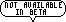
<style>
.page{position:relative;width:66px;height:22px;background:#ffffff}
.page>*{position:absolute;margin:0}
.t1{font:15px/7px "Pixelrom";letter-spacing:0.025em;color:#000000}
</style>
<div class="page">
<p class="t1" style="left:5px;top:2px;width:57px;height:13px;text-align:center">NOT AVAILABLE<br>IN BETA</p>
</div>
